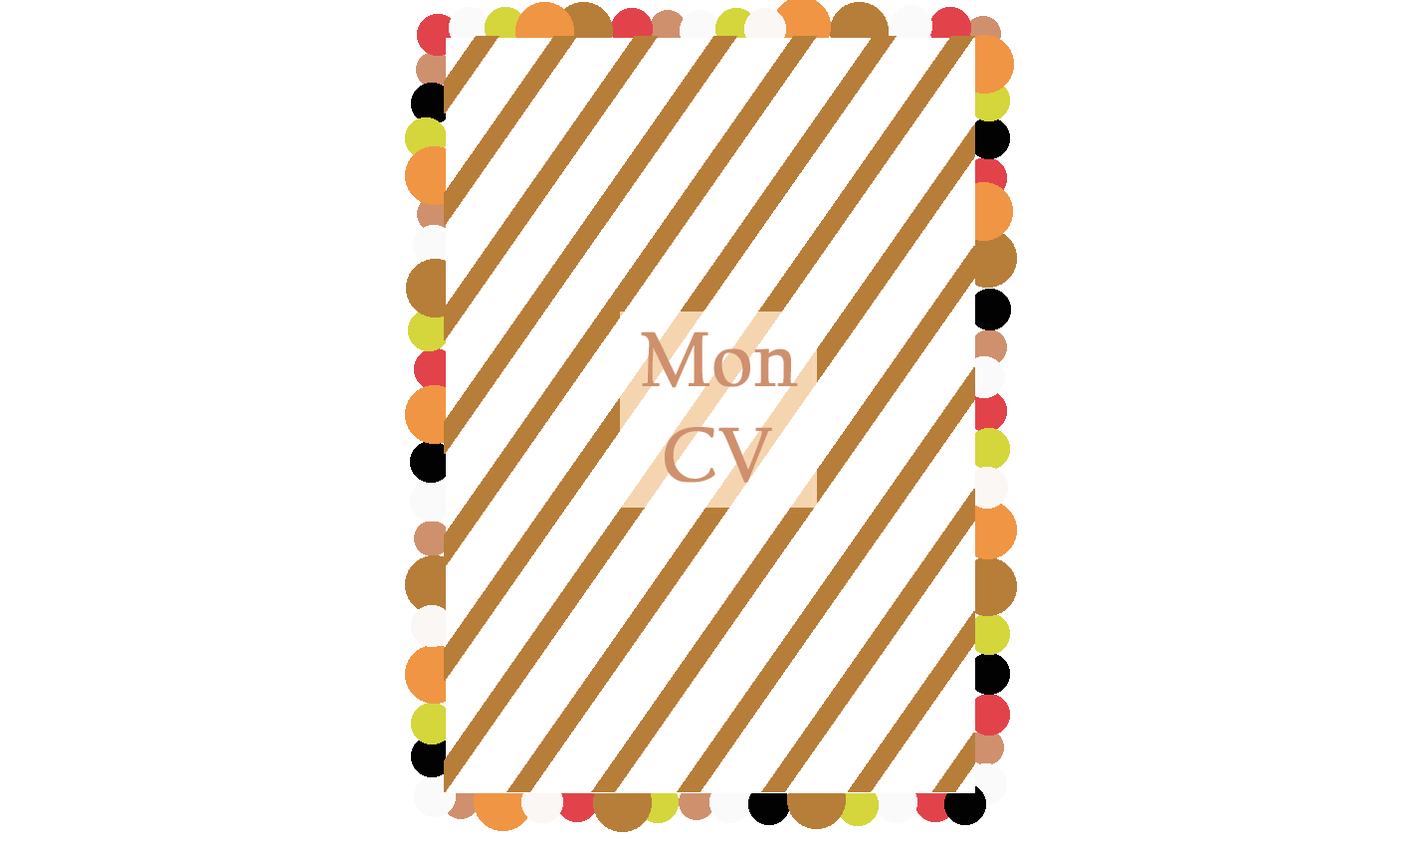
<style>
.page{position:relative;width:1410px;height:846px;background:#ffffff}
.page>*{position:absolute;margin:0}
.t1{font:79.6px "CalifornianFB-Reg";color:#cf906e;font-weight:bold}
</style>
<div class="page">
<p class="t1" style="left:641px;top:331px;width:157px;height:152px;text-align:center">Mon <br>CV</p>
</div>
